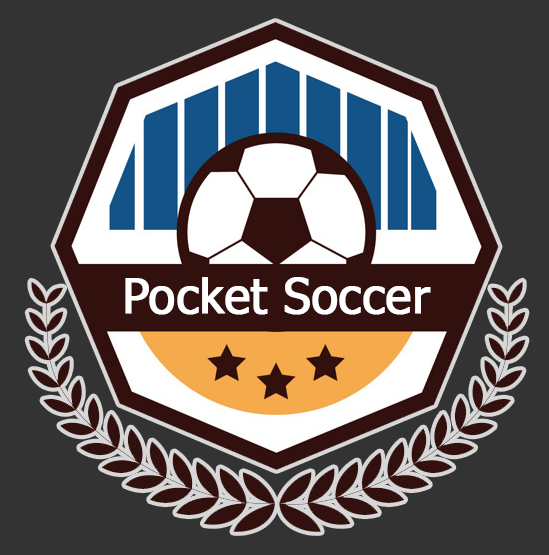
<style>
.page{position:relative;width:549px;height:555px;background:#333333}
.page>*{position:absolute;margin:0}
.t1{font:48px "Tahoma";color:#ffffff;font-weight:bold}
</style>
<div class="page">
<p class="t1" style="left:125px;top:277px;width:306px;height:38px">Pocket Soccer</p>
</div>
